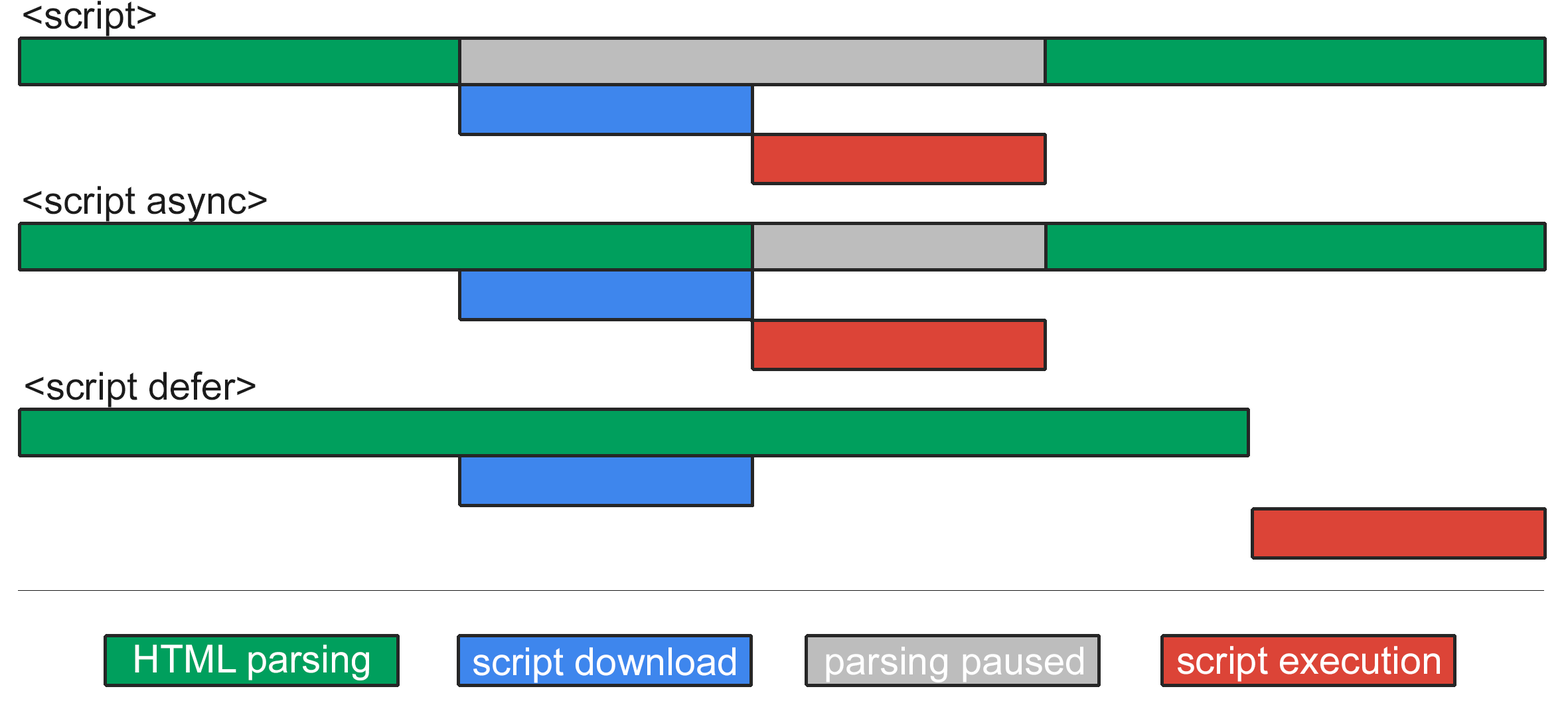
<style>
.page{position:relative;width:1568px;height:707px;background:#ffffff}
.page>*{position:absolute;margin:0}
.t1{font:38.7px "ArialMT";color:#1b1b1b}
.t2{font:38.7px "ArialMT";color:#ffffff}
</style>
<div class="page">
<p class="t1" style="left:23px;top:1px;width:133px;height:36px">&lt;script&gt;</p>
<p class="t1" style="left:23px;top:186px;width:244px;height:36px">&lt;script async&gt;</p>
<p class="t1" style="left:25px;top:371px;width:231px;height:37px">&lt;script defer&gt;</p>
<p class="t2" style="left:135px;top:645px;width:234px;height:35px">HTML parsing</p>
<p class="t2" style="left:473px;top:647px;width:263px;height:36px">script download</p>
<p class="t2" style="left:826px;top:647px;width:257px;height:35px">parsing paused</p>
<p class="t2" style="left:1178px;top:646px;width:262px;height:36px">script execution</p>
</div>
